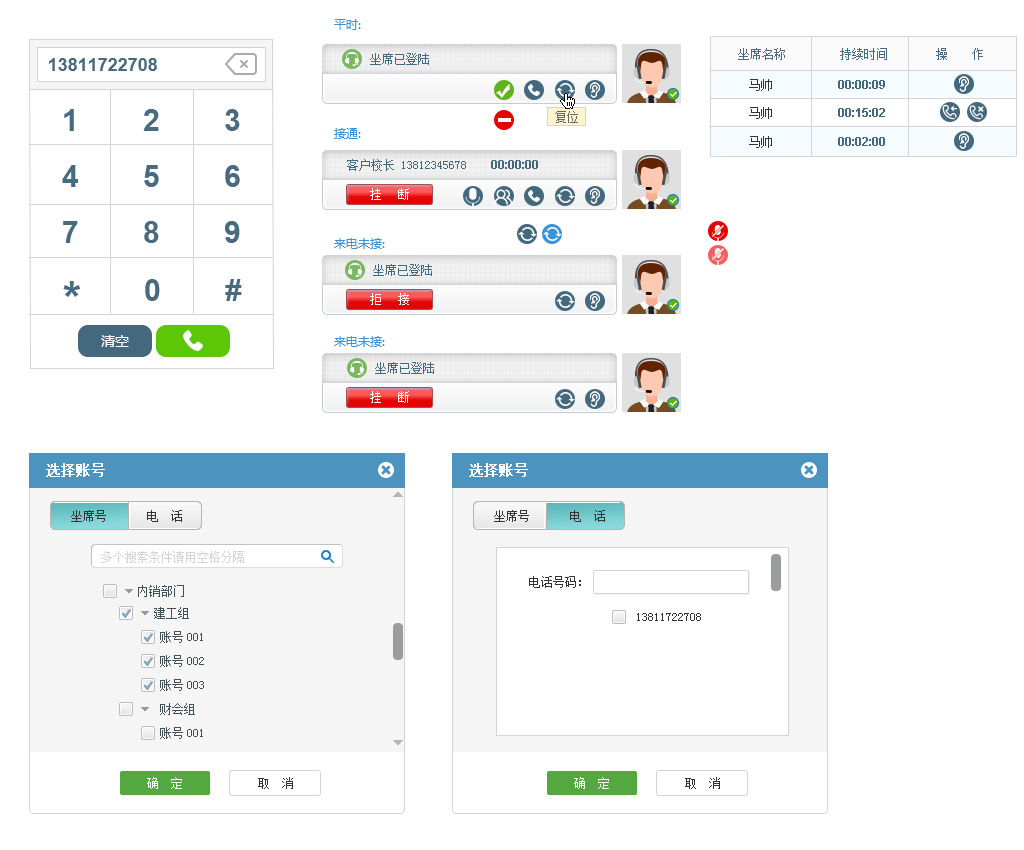
<style>
.page{position:relative;width:1024px;height:850px;background:#ffffff}
.page>*{position:absolute;margin:0}
.t1{font:12px "MicrosoftYaHei";color:#3a92d8;text-transform:uppercase}
.t2{font:12px "NSimSun";color:#44687d;text-transform:uppercase}
.t3{font:12px "SimSun";color:#486b80}
.t4{font:18px "Arial-BoldMT";color:#486b80;text-transform:uppercase}
.t5{font:12px "SimSun";color:#333333}
.t6{font:12px "Arial-BoldMT";color:#44687d}
.t7{font:30px/28px "Arial-BoldMT";color:#486b80;text-transform:uppercase}
.t8{font:12px "SimSun";color:#666666;text-transform:uppercase}
.t9{font:12px "SimSun";color:#44687d;text-transform:uppercase}
.t10{font:12px "Arial-BoldMT";color:#44687d;text-transform:uppercase}
.t11{font:13px "SimSun";letter-spacing:0.02em;color:#ffffff}
.t12{font:48px "Arial-BoldMT";color:#486b80;text-transform:uppercase}
.t13{font:30px "Arial-BoldMT";color:#486b80;text-transform:uppercase}
.t14{font:14px "MicrosoftYaHei";color:#ffffff;text-transform:uppercase}
.t15{font:14px "SimSun";color:#ffffff;font-weight:bold}
.t16{font:12px "SimSun";color:#d4d4d4}
.t17{font:12px "SimSun";color:#41515a}
.t18{font:12px "SimSun";color:#ffffff}
</style>
<div class="page">
<p class="t1" style="left:334px;top:19px;width:27px;height:11px">平时:</p>
<p class="t2" style="left:370px;top:53px;width:59px;height:12px">坐席已登陆</p>
<p class="t3" style="left:738px;top:48px;width:245px;height:12px">坐席名称         持续时间        操　　作</p>
<p class="t4" style="left:49px;top:58px;width:108px;height:13px">13811722708</p>
<p class="t5" style="left:749px;top:79px;width:23px;height:12px">马帅</p>
<p class="t6" style="left:838px;top:80px;width:47px;height:9px">00:00:09</p>
<p class="t7" style="left:62px;top:109px;width:178px;height:134px">1        2        3<br><br>4        5        6<br><br>7        8        9</p>
<p class="t8" style="left:555px;top:111px;width:23px;height:12px">复位</p>
<p class="t5" style="left:749px;top:107px;width:23px;height:12px">马帅</p>
<p class="t6" style="left:838px;top:108px;width:47px;height:9px">00:15:02</p>
<p class="t1" style="left:334px;top:128px;width:27px;height:11px">接通:</p>
<p class="t5" style="left:749px;top:136px;width:23px;height:12px">马帅</p>
<p class="t6" style="left:838px;top:137px;width:47px;height:9px">00:02:00</p>
<p class="t9" style="left:347px;top:159px;width:191px;height:12px">客户校长 13812345678    <span class="t10">00:00:00</span></p>
<p class="t11" style="left:370px;top:188px;width:39px;height:12px">挂  断</p>
<p class="t1" style="left:334px;top:238px;width:51px;height:11px">来电未接:</p>
<p class="t2" style="left:373px;top:264px;width:59px;height:12px">坐席已登陆</p>
<p class="t12" style="left:63px;top:281px;width:17px;height:16px">*</p>
<p class="t13" style="left:145px;top:279px;width:97px;height:22px">0        #</p>
<p class="t11" style="left:370px;top:293px;width:39px;height:12px">拒  接</p>
<p class="t14" style="left:101px;top:335px;width:28px;height:12px">清空</p>
<p class="t1" style="left:334px;top:336px;width:51px;height:11px">来电未接:</p>
<p class="t2" style="left:375px;top:362px;width:59px;height:12px">坐席已登陆</p>
<p class="t11" style="left:370px;top:391px;width:39px;height:12px">挂  断</p>
<p class="t15" style="left:46px;top:463px;width:59px;height:14px">选择账号</p>
<p class="t15" style="left:469px;top:463px;width:59px;height:14px">选择账号</p>
<p class="t5" style="left:71px;top:510px;width:35px;height:12px">坐席号</p>
<p class="t5" style="left:147px;top:510px;width:35px;height:12px">电  话</p>
<p class="t5" style="left:494px;top:510px;width:35px;height:12px">坐席号</p>
<p class="t5" style="left:570px;top:510px;width:35px;height:12px">电  话</p>
<p class="t16" style="left:101px;top:551px;width:143px;height:12px">多个搜索条件请用空格分隔</p>
<p class="t5" style="left:529px;top:576px;width:52px;height:12px">电话号码：</p>
<p class="t17" style="left:138px;top:585px;width:46px;height:12px">内销部门</p>
<p class="t17" style="left:154px;top:607px;width:35px;height:12px">建工组</p>
<p class="t5" style="left:637px;top:613px;width:64px;height:8px">13811722708</p>
<p class="t17" style="left:160px;top:631px;width:43px;height:12px">账号001</p>
<p class="t17" style="left:160px;top:655px;width:44px;height:12px">账号002</p>
<p class="t17" style="left:160px;top:679px;width:44px;height:12px">账号003</p>
<p class="t17" style="left:160px;top:703px;width:35px;height:12px">财会组</p>
<p class="t17" style="left:160px;top:727px;width:43px;height:12px">账号001</p>
<p class="t18" style="left:147px;top:777px;width:35px;height:12px">确  定</p>
<p class="t5" style="left:258px;top:777px;width:35px;height:12px">取  消</p>
<p class="t18" style="left:574px;top:777px;width:35px;height:12px">确  定</p>
<p class="t5" style="left:685px;top:777px;width:35px;height:12px">取  消</p>
</div>
